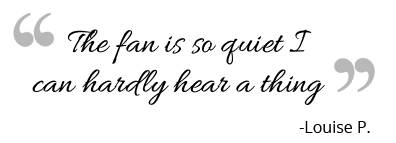
<style>
.page{position:relative;width:396px;height:143px;background:#ffffff}
.page>*{position:absolute;margin:0}
.t1{font:35.6px "Allura-Regular";color:#000000}
.t2{font:16px "OpenSans";color:#000000}
</style>
<div class="page">
<p class="t1" style="left:67px;top:29px;width:245px;height:36px">The fan is so quiet I</p>
<p class="t1" style="left:32px;top:69px;width:293px;height:36px">can hardly hear a thing</p>
<p class="t2" style="left:299px;top:121px;width:71px;height:12px">-Louise P.</p>
</div>
